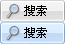
<style>
.page{position:relative;width:65px;height:44px}
.page>*{position:absolute;margin:0}
.t1{font:12px "SimSun";color:#000000}
</style>
<div class="page">
<p class="t1" style="left:24px;top:5px;width:23px;height:11px">搜索</p>
<p class="t1" style="left:24px;top:27px;width:23px;height:11px">搜索</p>
</div>
